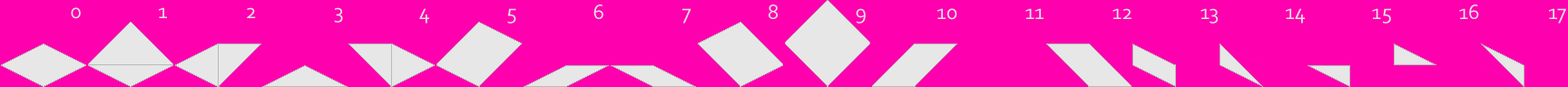
<style>
.page{position:relative;width:1568px;height:87px;background:#ff00ae}
.page>*{position:absolute;margin:0}
.t1{font:21.8px "Corbel";color:#e7e7e7}
</style>
<div class="page">
<p class="t1" style="left:593px;top:5px;width:10px;height:14px">6</p>
<p class="t1" style="left:769px;top:5px;width:9px;height:14px">8</p>
<p class="t1" style="left:1459px;top:5px;width:20px;height:14px">16</p>
<p class="t1" style="left:71px;top:7px;width:10px;height:12px">0</p>
<p class="t1" style="left:159px;top:7px;width:8px;height:11px">1</p>
<p class="t1" style="left:247px;top:7px;width:9px;height:11px">2</p>
<p class="t1" style="left:334px;top:7px;width:9px;height:16px">3</p>
<p class="t1" style="left:419px;top:8px;width:10px;height:16px">4</p>
<p class="t1" style="left:507px;top:8px;width:9px;height:16px">5</p>
<p class="t1" style="left:682px;top:8px;width:9px;height:16px">7</p>
<p class="t1" style="left:856px;top:8px;width:10px;height:16px">9</p>
<p class="t1" style="left:937px;top:8px;width:20px;height:12px">10</p>
<p class="t1" style="left:1025px;top:8px;width:19px;height:11px">11</p>
<p class="t1" style="left:1112px;top:8px;width:20px;height:11px">12</p>
<p class="t1" style="left:1200px;top:8px;width:18px;height:16px">13</p>
<p class="t1" style="left:1286px;top:8px;width:19px;height:16px">14</p>
<p class="t1" style="left:1372px;top:8px;width:19px;height:16px">15</p>
<p class="t1" style="left:1549px;top:8px;width:17px;height:16px">17</p>
</div>
